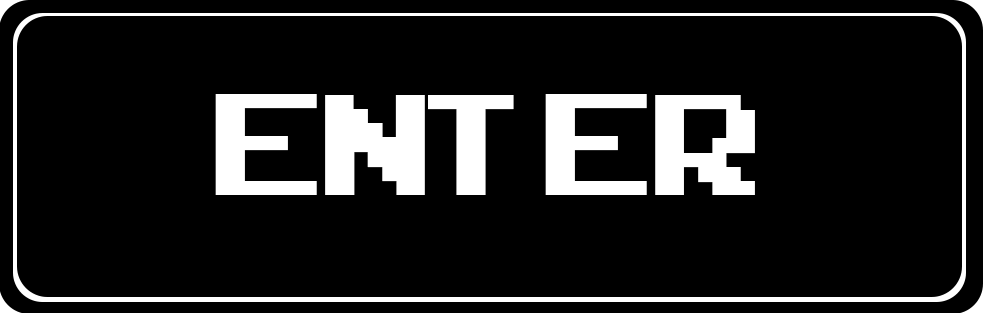
<style>
.page{position:relative;width:983px;height:313px;background:#000000}
.page>*{position:absolute;margin:0}
.t1{font:200px "ArcadeClassic";color:#ffffff}
</style>
<div class="page">
<p class="t1" style="left:215px;top:94px;width:540px;height:101px">ENTER</p>
</div>
